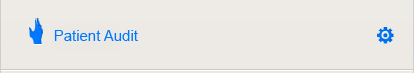
<style>
.page{position:relative;width:414px;height:73px;background:#edeae5}
.page>*{position:absolute;margin:0}
.t1{font:15px "ArialMT";color:#0077ff}
</style>
<div class="page">
<p class="t1" style="left:54px;top:30px;width:84px;height:11px">Patient Audit</p>
</div>
